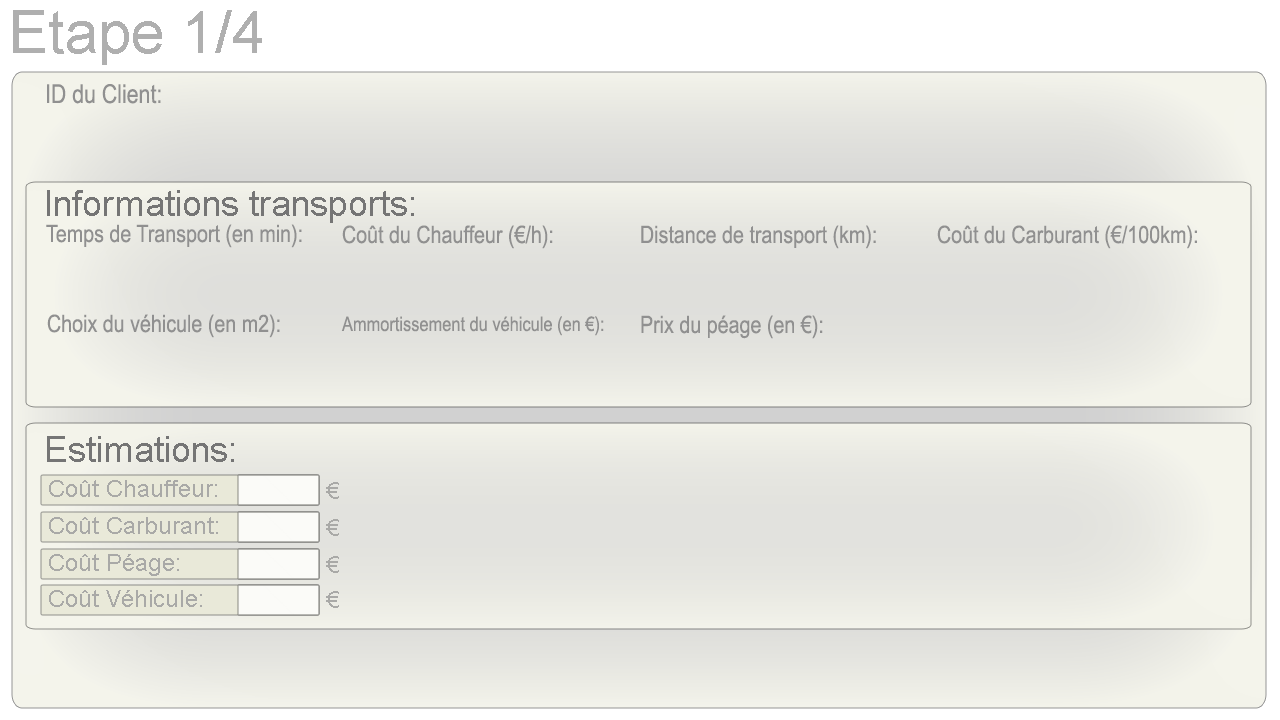
<style>
.page{position:relative;width:1280px;height:720px}
.page>*{position:absolute;margin:0}
.t1{font:60px "ArialMT";color:#afafaf}
.t2{font:26px "ArialNarrow";color:#909090}
.t3{font:36px "ArialMT";color:#757575}
.t4{font:24px "ArialNarrow";color:#909090}
.t5{font:20px "ArialNarrow";color:#909090}
.t6{font:24px "ArialMT";color:#a9a9a7}
</style>
<div class="page">
<p class="t1" style="left:13px;top:10px;width:249px;height:55px">Etape 1/4</p>
<p class="t2" style="left:47px;top:84px;width:114px;height:20px">ID du Client:</p>
<p class="t3" style="left:47px;top:190px;width:367px;height:33px">Informations transports:</p>
<p class="t4" style="left:46px;top:224px;width:256px;height:24px">Temps de Transport (en min):</p>
<p class="t4" style="left:342px;top:225px;width:211px;height:24px">Coût du Chauffeur (€/h):</p>
<p class="t4" style="left:641px;top:225px;width:235px;height:24px">Distance de transport (km):</p>
<p class="t4" style="left:937px;top:225px;width:260px;height:24px">Coût du Carburant (€/100km):</p>
<p class="t4" style="left:47px;top:314px;width:233px;height:24px">Choix du véhicule (en m2):</p>
<p class="t5" style="left:341px;top:316px;width:263px;height:20px">Ammortissement du véhicule (en €):</p>
<p class="t4" style="left:641px;top:315px;width:182px;height:24px">Prix du péage (en €):</p>
<p class="t3" style="left:47px;top:436px;width:187px;height:26px">Estimations:</p>
<p class="t6" style="left:49px;top:480px;width:168px;height:17px">Coût Chauffeur:</p>
<p class="t6" style="left:326px;top:482px;width:13px;height:17px">€</p>
<p class="t6" style="left:49px;top:517px;width:169px;height:17px">Coût Carburant:</p>
<p class="t6" style="left:326px;top:519px;width:13px;height:17px">€</p>
<p class="t6" style="left:49px;top:554px;width:130px;height:22px">Coût Péage:</p>
<p class="t6" style="left:326px;top:556px;width:13px;height:17px">€</p>
<p class="t6" style="left:49px;top:590px;width:153px;height:17px">Coût Véhicule:</p>
<p class="t6" style="left:326px;top:591px;width:13px;height:17px">€</p>
</div>
